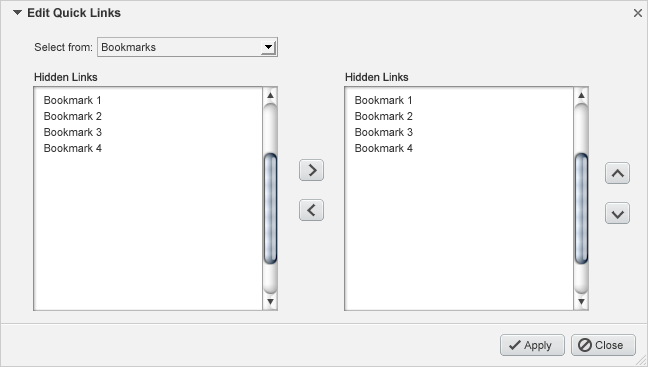
<style>
.page{position:relative;width:648px;height:367px;background:#f2f2f2}
.page>*{position:absolute;margin:0}
.t1{font:12px "Arial-BoldMT";color:#333333}
.t2{font:11px "ArialMT";color:#333333}
.t3{font:11px/16px "ArialMT";color:#333333}
</style>
<div class="page">
<p class="t1" style="left:28px;top:8px;width:93px;height:10px">Edit Quick Links</p>
<p class="t2" style="left:34px;top:43px;width:58px;height:8px">Select from:</p>
<p class="t2" style="left:102px;top:43px;width:54px;height:8px">Bookmarks</p>
<p class="t2" style="left:34px;top:72px;width:64px;height:9px">Hidden Links</p>
<p class="t2" style="left:345px;top:72px;width:64px;height:9px">Hidden Links</p>
<p class="t3" style="left:44px;top:96px;width:58px;height:56px">Bookmark 1<br>Bookmark 2<br>Bookmark 3<br>Bookmark 4</p>
<p class="t3" style="left:355px;top:96px;width:58px;height:56px">Bookmark 1<br>Bookmark 2<br>Bookmark 3<br>Bookmark 4</p>
<p class="t2" style="left:524px;top:341px;width:28px;height:11px">Apply</p>
<p class="t2" style="left:595px;top:341px;width:28px;height:8px">Close</p>
</div>
